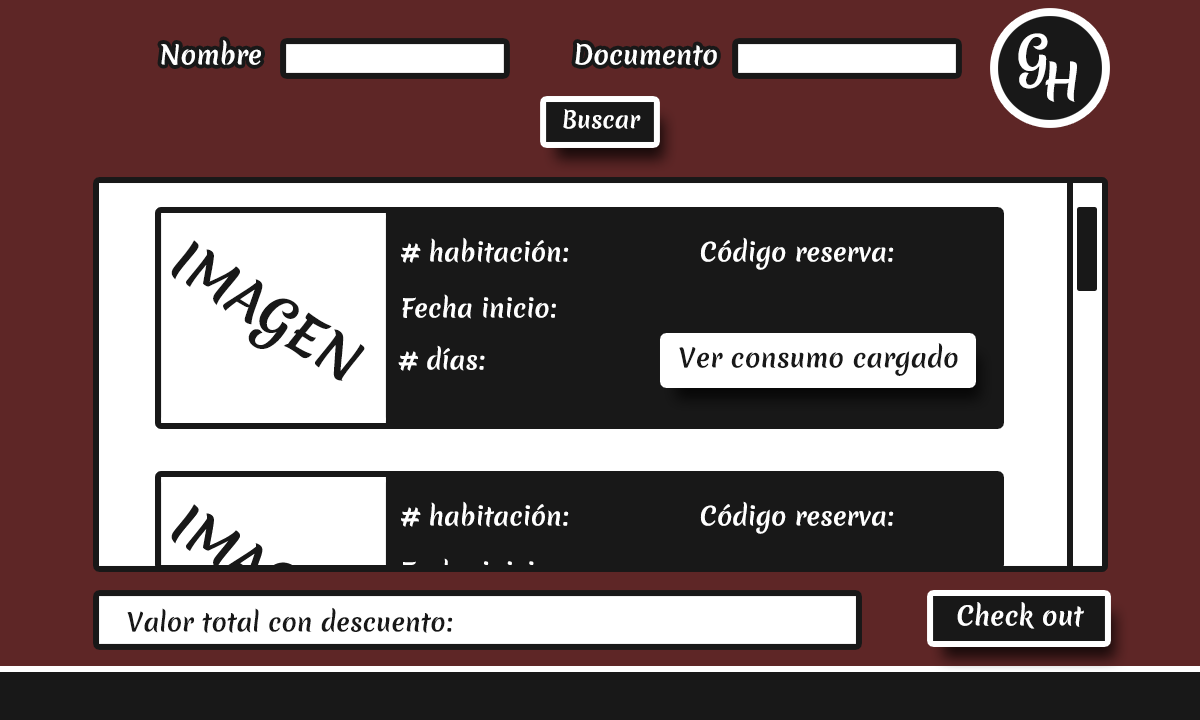
<style>
.page{position:relative;width:1200px;height:720px;background:#181818}
.page>*{position:absolute;margin:0}
.t1{font:25.6px "MeriendaOne-Regular";color:#ffffff}
.t2{font:48.4px "MeriendaOne-Regular";color:#ffffff}
.t3{font:22.7px "MeriendaOne-Regular";color:#ffffff}
.t4{font:51.9px "MeriendaOne-Regular";color:#181818}
.t5{font:24.6px "MeriendaOne-Regular";color:#ffffff}
.t6{font:25.6px "MeriendaOne-Regular";color:#181818}
.t7{font:24.6px "MeriendaOne-Regular";color:#181818}
</style>
<div class="page">
<p class="t1" style="left:161px;top:40px;width:100px;height:25px">Nombre</p>
<p class="t2" style="left:1018px;top:33px;width:30px;height:56px">G</p>
<p class="t1" style="left:575px;top:43px;width:142px;height:23px">Documento</p>
<p class="t2" style="left:1045px;top:61px;width:32px;height:41px">H</p>
<p class="t3" style="left:563px;top:109px;width:78px;height:20px">Buscar</p>
<p class="t4" style="left:171px;top:240px;width:194px;height:141px;rotate:32deg">IMAGEN</p>
<p class="t5" style="left:401px;top:237px;width:168px;height:26px"># habitación:</p>
<p class="t5" style="left:700px;top:237px;width:194px;height:33px">Código reserva:</p>
<p class="t5" style="left:402px;top:294px;width:154px;height:25px">Fecha inicio:</p>
<p class="t5" style="left:398px;top:345px;width:87px;height:26px"># días:</p>
<p class="t6" style="left:679px;top:343px;width:279px;height:33px">Ver consumo cargado</p>
<p class="t5" style="left:401px;top:501px;width:168px;height:26px"># habitación:</p>
<p class="t5" style="left:700px;top:501px;width:194px;height:33px">Código reserva:</p>
<p class="t1" style="left:957px;top:602px;width:127px;height:27px">Check out</p>
<p class="t7" style="left:127px;top:607px;width:326px;height:26px">Valor total con descuento:</p>
</div>
